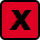
<style>
.page{position:relative;width:40px;height:40px;background:#df0024}
.page>*{position:absolute;margin:0}
.t1{font:30px "ErasITC-Bold";color:#000000}
</style>
<div class="page">
<p class="t1" style="left:9px;top:10px;width:23px;height:20px">X</p>
</div>
